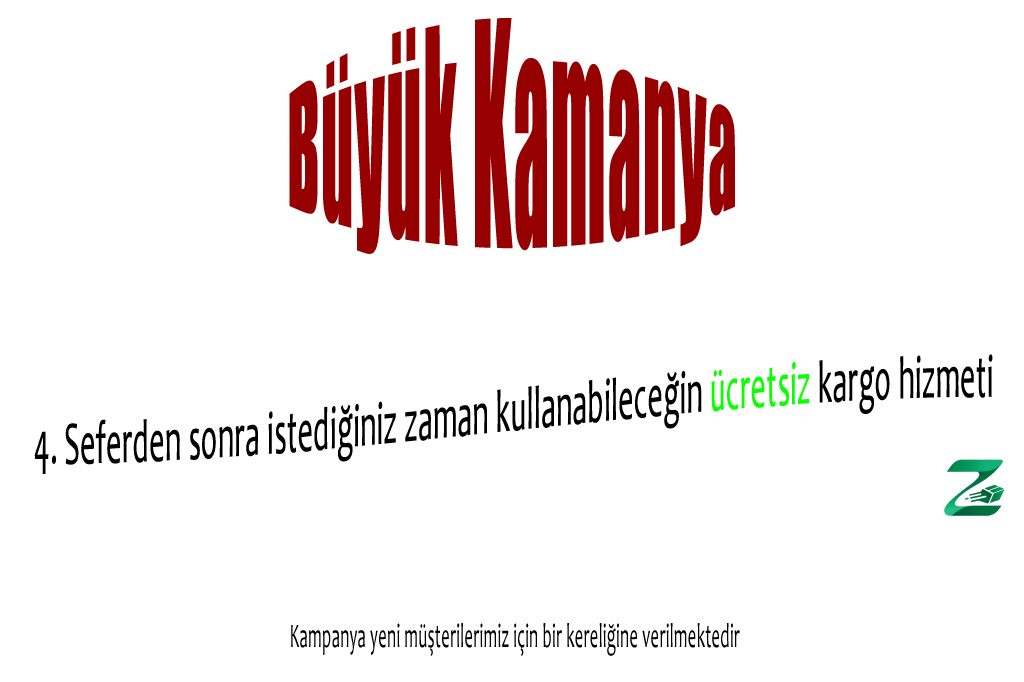
<style>
.page{position:relative;width:1024px;height:682px;background:#ffffff}
.page>*{position:absolute;margin:0}
.t1{font:139.3px "Impact";letter-spacing:0.02em;color:#970000;scale:0.48 1}
.t2{font:61px/145.8px "Candara";letter-spacing:0.02em;color:#000000;scale:0.48 1}
.t3{font:61px/145.8px "Candara";letter-spacing:0.02em;color:#0cff00;scale:0.48 1}
.t4{font:34.8px "Candara";letter-spacing:0.02em;color:#000000;scale:0.48 1}
</style>
<div class="page">
<p class="t1" style="left:289px;top:18px;width:446px;height:236px">Büyük Kamanya</p>
<p class="t2" style="left:34px;top:354px;width:959px;height:120px;text-align:center">4. Seferden sonra istediğiniz zaman kullanabileceğin <span class="t3">ücretsiz</span> kargo hizmeti</p>
<p class="t4" style="left:291px;top:623px;width:449px;height:33px">Kampanya yeni müşterilerimiz için bir kereliğine verilmektedir</p>
</div>
